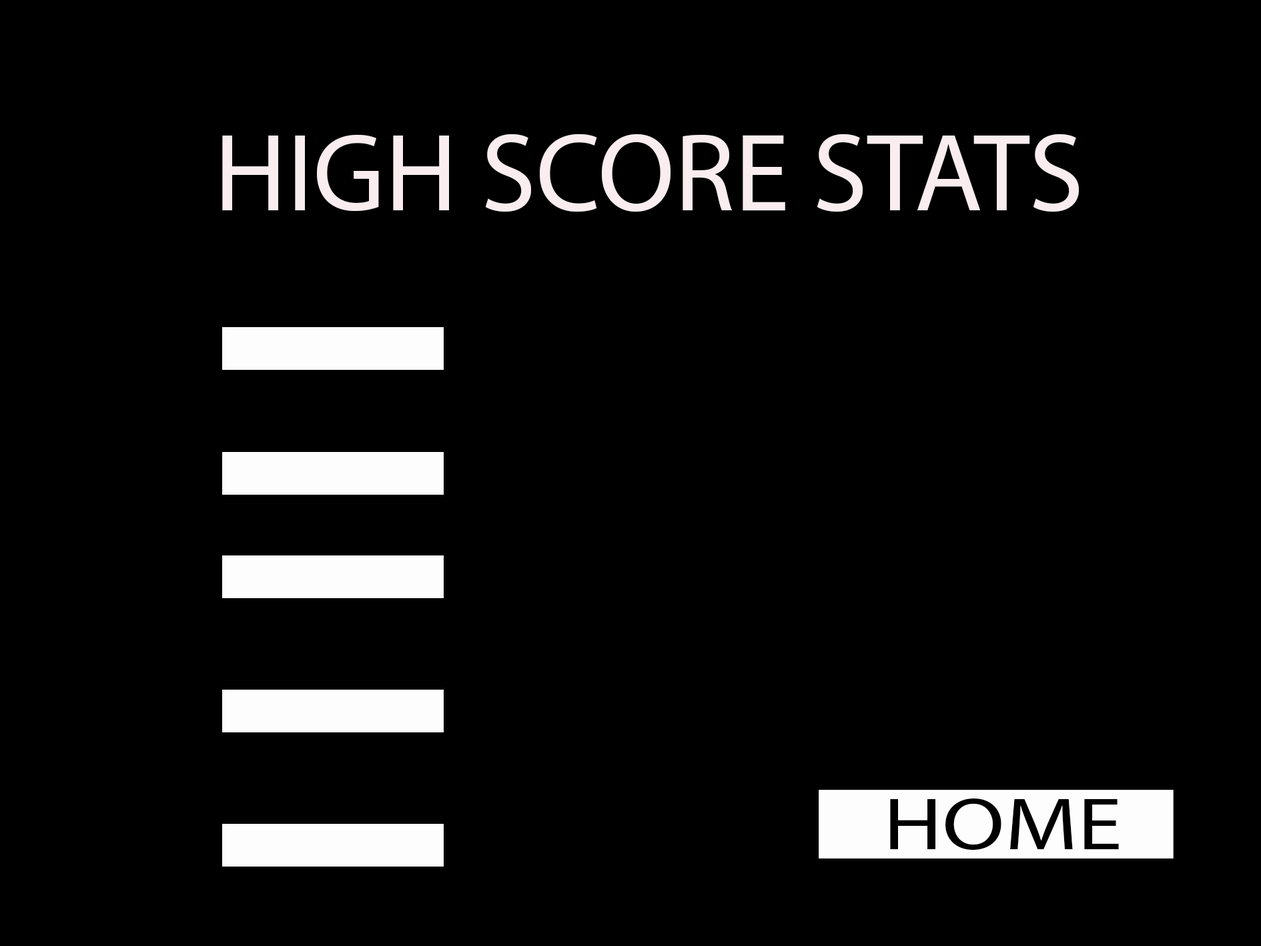
<style>
.page{position:relative;width:1261px;height:946px;background:#000000}
.page>*{position:absolute;margin:0}
.t1{font:111.2px "MyriadPro-Regular";color:#f9edef}
.t2{font:74.4px "MyriadPro-Regular";color:#000000;scale:1.22 1}
</style>
<div class="page">
<p class="t1" style="left:222px;top:133px;width:857px;height:79px">HIGH SCORE STATS</p>
<p class="t2" style="left:890px;top:797px;width:229px;height:53px">HOME</p>
</div>
